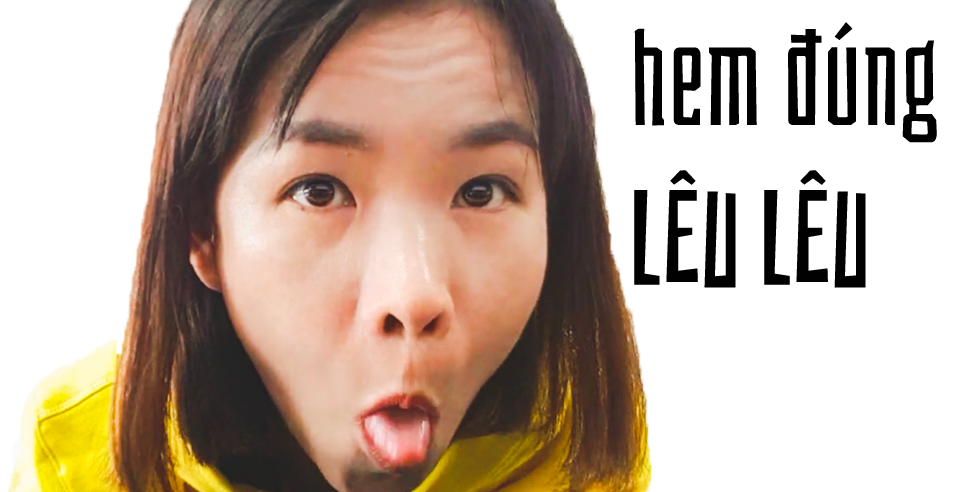
<style>
.page{position:relative;width:955px;height:492px;background:#ffffff}
.page>*{position:absolute;margin:0}
.t1{font:133px "Bahianita-Regular";color:#010101}
</style>
<div class="page">
<p class="t1" style="left:634px;top:22px;width:303px;height:266px">hem đúng<br>LÊU LÊU</p>
</div>
